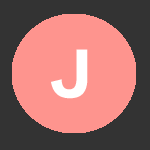
<style>
.page{position:relative;width:150px;height:150px;background:#fe948e}
.page>*{position:absolute;margin:0}
.t1{font:55.8px "FZLTTHB--B51-0";color:#ffffff}
</style>
<div class="page">
<p class="t1" style="left:51px;top:49px;width:37px;height:50px">J</p>
</div>
